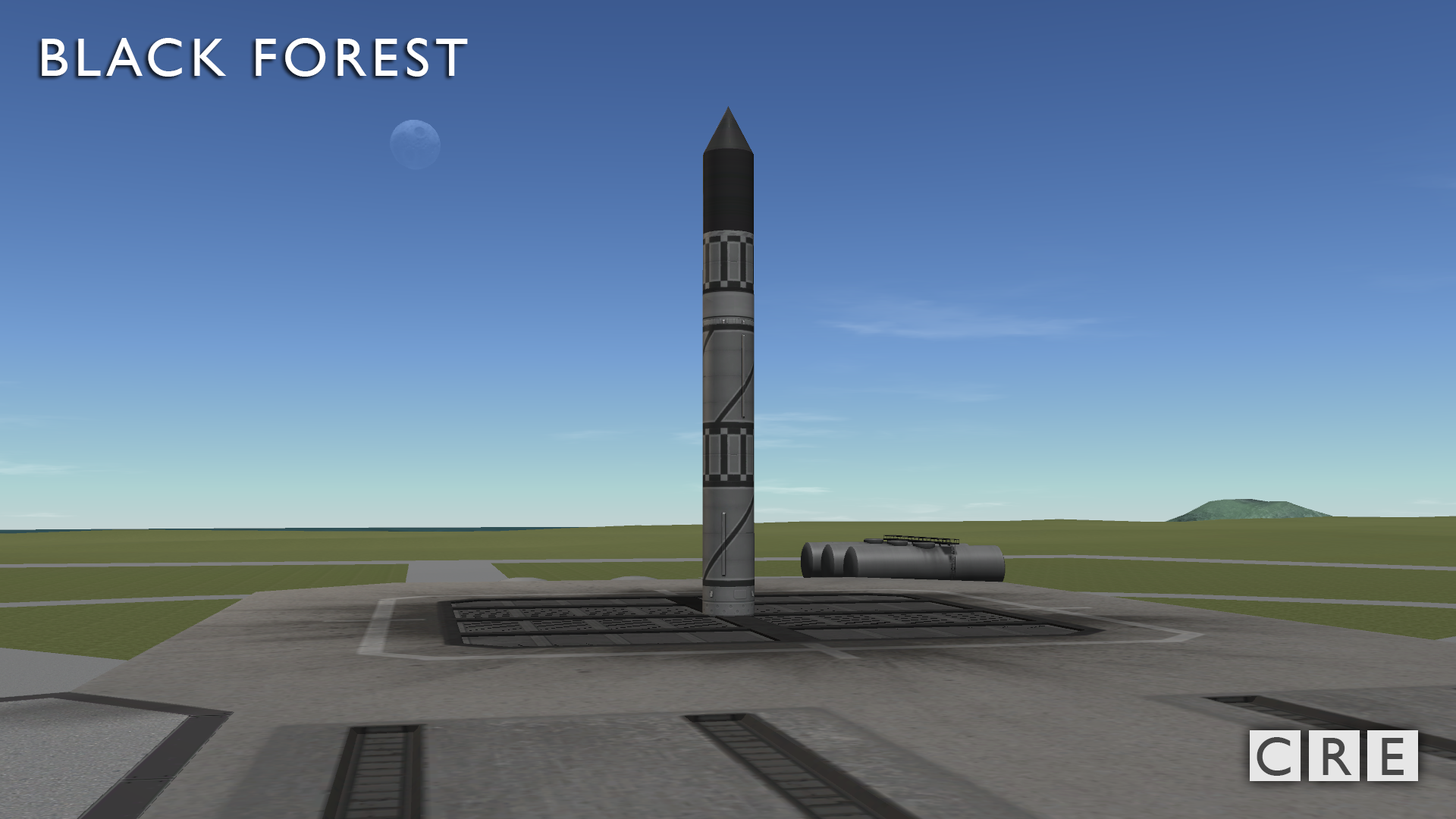
<style>
.page{position:relative;width:1456px;height:819px}
.page>*{position:absolute;margin:0}
.t1{font:54.6px "GillSansMT";letter-spacing:0.1em;color:#ffffff}
.t2{font:54.6px "GillSansMT";letter-spacing:0.1em;color:#474747}
</style>
<div class="page">
<p class="t1" style="left:42px;top:38px;width:426px;height:39px">BLACK FOREST</p>
<p class="t2" style="left:1257px;top:737px;width:147px;height:39px">C R E</p>
</div>
